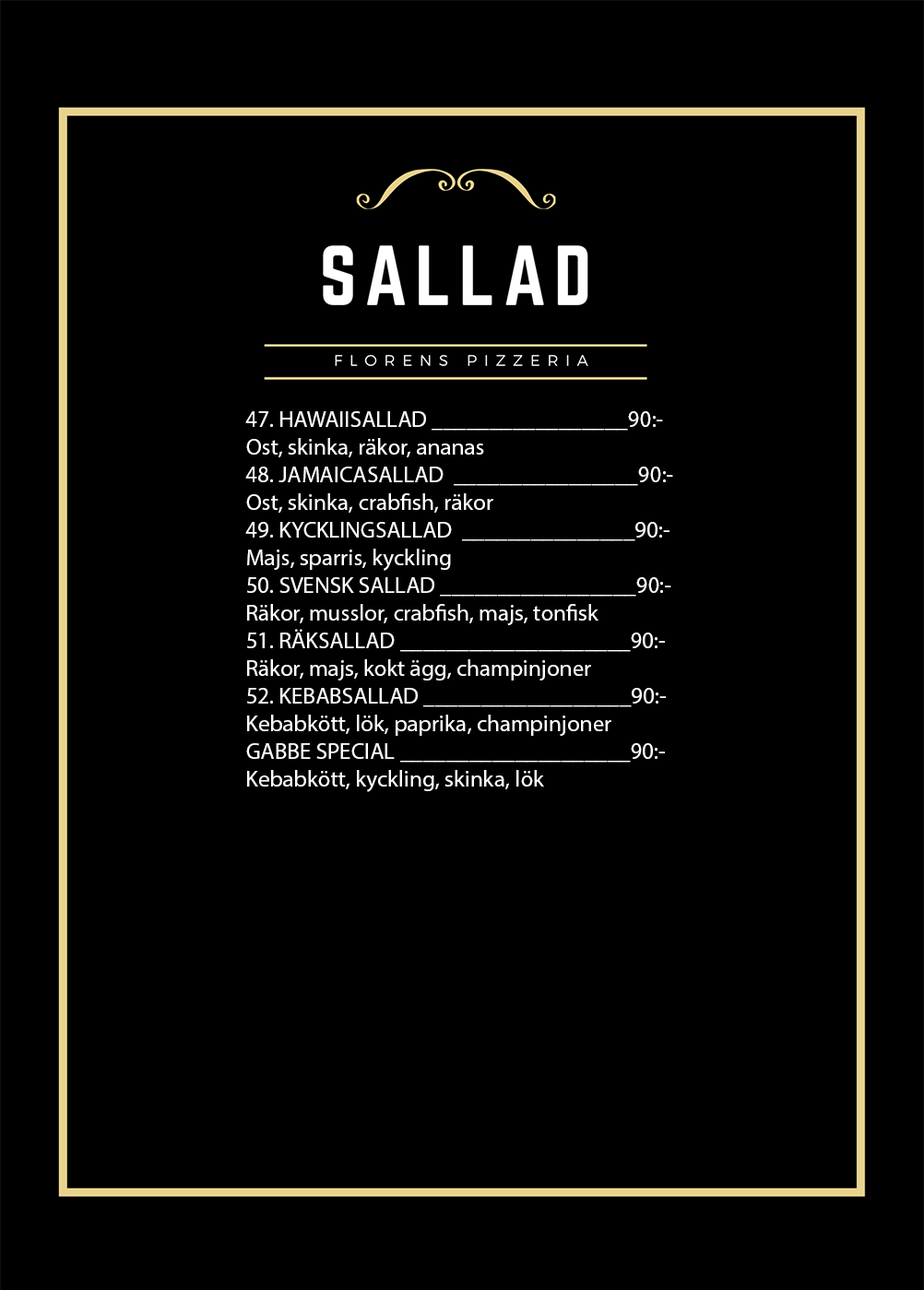
<style>
.page{position:relative;width:924px;height:1290px;background:#000000}
.page>*{position:absolute;margin:0}
.t1{font:23.1px "MyriadPro-Regular";color:#ffffff}
</style>
<div class="page">
<p class="t1" style="left:245px;top:411px;width:428px;height:381px">47. HAWAIISALLAD _________________90:-<br>Ost, skinka, räkor, ananas<br>48. JAMAICASALLAD  ________________90:-<br>Ost, skinka, crabfish, räkor<br>49. KYCKLINGSALLAD  _______________90:-<br>Majs, sparris, kyckling<br>50. SVENSK SALLAD _________________90:-<br>Räkor, musslor, crabfish, majs, tonfisk<br>51. RÄKSALLAD ____________________90:-<br>Räkor, majs, kokt ägg, champinjoner<br>52. KEBABSALLAD __________________90:-<br>Kebabkött, lök, paprika, champinjoner<br>GABBE SPECIAL ____________________90:-<br>Kebabkött, kyckling, skinka, lök</p>
</div>
